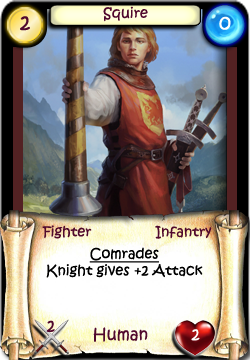
<style>
.page{position:relative;width:250px;height:360px}
.page>*{position:absolute;margin:0}
.t1{font:14px "KristenITC-Regular";color:#51092d}
.t2{font:20px "KristenITC-Regular";color:#51092d}
.t3{font:20px "KristenITC-Regular";color:#ffffff}
.t4{font:14px "KristenITC-Regular";color:#000000}
.t5{font:14px "KristenITC-Regular";color:#000000;text-decoration:underline}
.t6{font:16px "KristenITC-Regular";color:#51092d}
.t7{font:16px "KristenITC-Regular";color:#fefefe}
</style>
<div class="page">
<p class="t1" style="left:103px;top:6px;width:45px;height:16px">Squire</p>
<p class="t2" style="left:20px;top:16px;width:10px;height:15px">2</p>
<p class="t3" style="left:219px;top:16px;width:12px;height:14px">0</p>
<p class="t1" style="left:42px;top:225px;width:50px;height:14px">Fighter</p>
<p class="t1" style="left:155px;top:225px;width:57px;height:14px">Infantry</p>
<p class="t4" style="left:46px;top:247px;width:157px;height:31px;text-align:center"><span class="t5">Comrades<br></span>Knight gives +2 Attack</p>
<p class="t6" style="left:46px;top:320px;width:9px;height:12px">2</p>
<p class="t6" style="left:93px;top:327px;width:55px;height:15px">Human</p>
<p class="t7" style="left:191px;top:329px;width:9px;height:12px">2</p>
</div>
